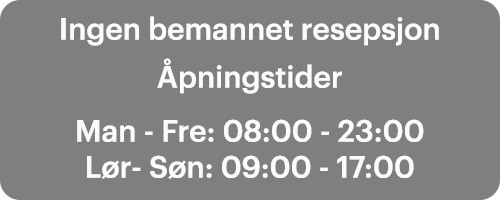
<style>
.page{position:relative;width:500px;height:200px;background:#7f7f7f}
.page>*{position:absolute;margin:0}
.t1{font:30px "false";color:#fcfbfb}
</style>
<div class="page">
<p class="t1" style="left:61px;top:16px;width:378px;height:163px;text-align:center">Ingen bemannet resepsjon<br><br><br>Åpningstider<br><br><br><br>Man - Fre: 08:00 - 23:00<br>Lør- Søn: 09:00 - 17:00</p>
</div>
